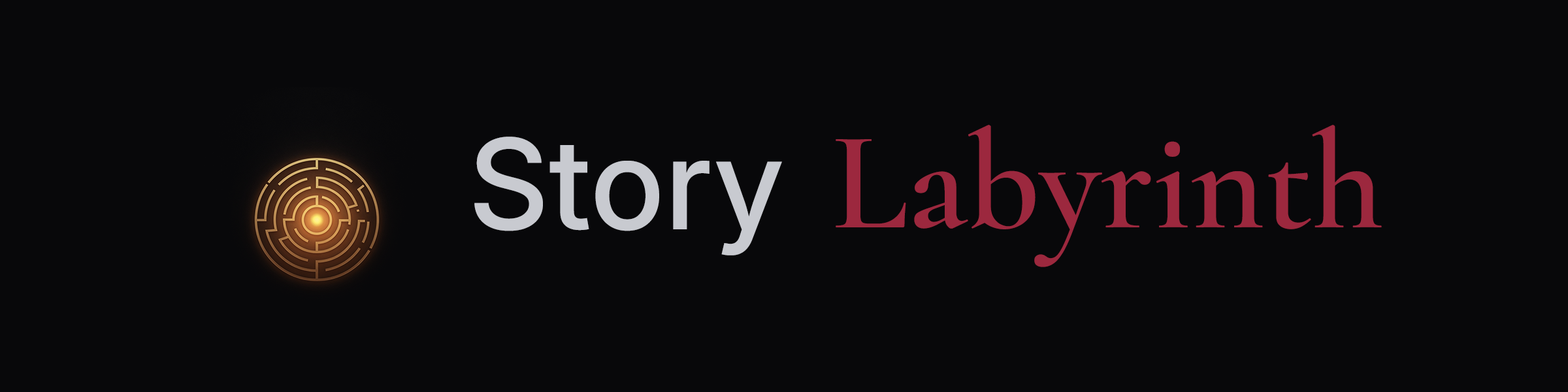
<style>
.page{position:relative;width:1568px;height:392px;background:#08080a}
.page>*{position:absolute;margin:0}
.t1{font:141.1px "Cormorant-SemiBold";color:#9c283e}
.t2{font:125.4px "Inter18pt-Medium";color:#c8cad0}
</style>
<div class="page">
<p class="t1" style="left:836px;top:125px;width:546px;height:142px">Labyrinth</p>
<p class="t2" style="left:474px;top:137px;width:308px;height:118px">Story</p>
</div>
